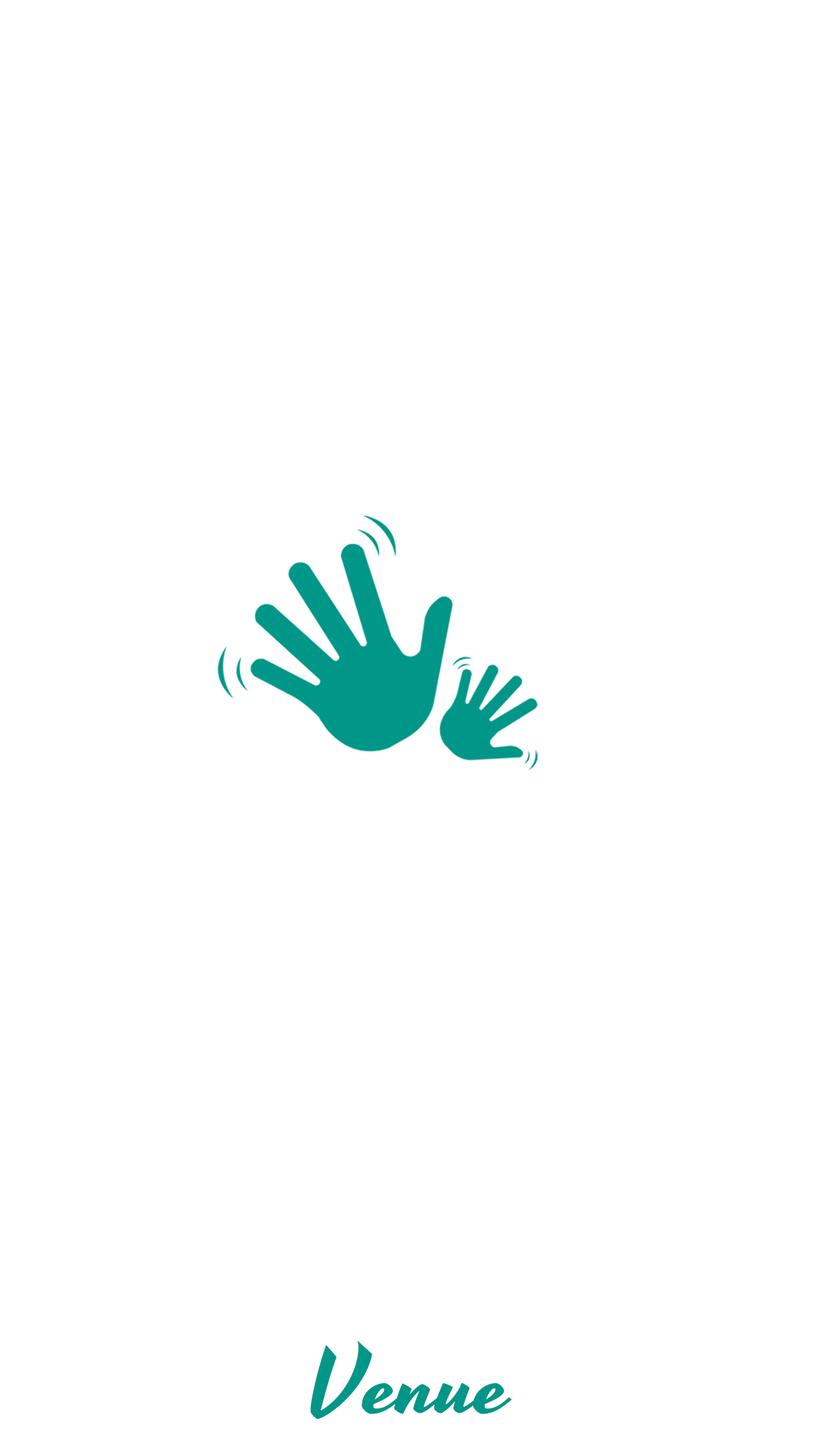
<style>
.page{position:relative;width:819px;height:1456px;background:#ffffff}
.page>*{position:absolute;margin:0}
.t1{font:92.6px "Yesteryear-Regular";color:#009688;scale:1.07 1}
</style>
<div class="page">
<p class="t1" style="left:310px;top:1341px;width:202px;height:78px">Venue</p>
</div>
